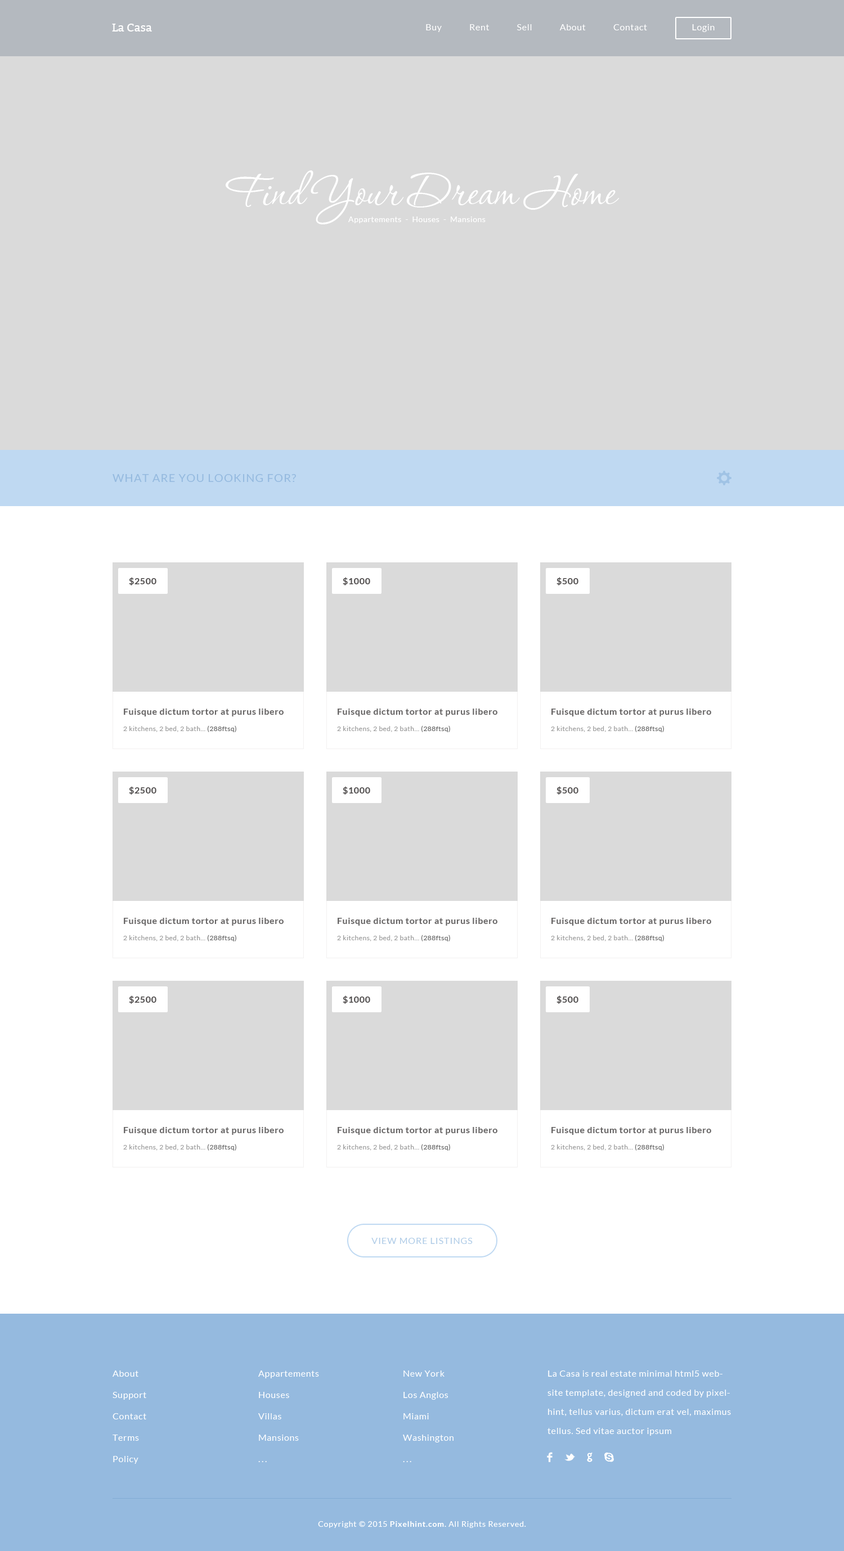
<style>
.page{position:relative;width:844px;height:1551px;background:#dadada}
.page>*{position:absolute;margin:0}
.t1{font:11.2px "Bitter-Regular";color:#ffffff}
.t2{font:9px "Lato-Regular";letter-spacing:0.04em;color:#ffffff}
.t3{font:56.2px "P22Corinthia";color:#ffffff}
.t4{font:7.9px "Lato-Regular";letter-spacing:0.04em;color:#ffffff}
.t5{font:11.2px "Lato-Regular";letter-spacing:0.06em;color:#95badf;text-transform:uppercase}
.t6{font:9px "Lato-Bold";letter-spacing:0.04em;color:#514e4e}
.t7{font:9px "Lato-Bold";letter-spacing:0.04em;color:#676565}
.t8{font:6.8px "Lato-Regular";letter-spacing:0.04em;color:#9d9d9d}
.t9{font:6.8px "Lato-Regular";letter-spacing:0.04em;color:#676767}
.t10{font:9px "Lato-Regular";letter-spacing:0.06em;color:#b0cce7;text-transform:uppercase}
.t11{font:9px/21.4px "Lato-Regular";letter-spacing:0.04em;color:#ffffff}
.t12{font:9px/21.4px "Lato-Regular";letter-spacing:0.16em;color:#ffffff}
.t13{font:9px/19.1px "Lato-Regular";letter-spacing:0.04em;color:#ffffff}
.t14{font:7.9px "Lato-Regular";letter-spacing:0.06em;color:#ffffff}
.t15{font:7.9px "Lato-Bold";letter-spacing:0.06em;color:#ffffff}
</style>
<div class="page">
<p class="t1" style="left:112px;top:24px;width:40px;height:8px">La Casa</p>
<p class="t2" style="left:426px;top:24px;width:221px;height:8px">Buy             Rent             Sell             About             Contact</p>
<p class="t2" style="left:692px;top:24px;width:22px;height:8px">Login</p>
<p class="t3" style="left:226px;top:170px;width:393px;height:54px">Find Your Dream Home</p>
<p class="t4" style="left:348px;top:217px;width:137px;height:6px">Appartements  -  Houses  -  Mansions</p>
<p class="t5" style="left:112px;top:474px;width:184px;height:8px">What are you looking for?</p>
<p class="t6" style="left:129px;top:577px;width:27px;height:9px">$2500</p>
<p class="t6" style="left:343px;top:577px;width:27px;height:9px">$1000</p>
<p class="t6" style="left:556px;top:577px;width:22px;height:9px">$500</p>
<p class="t7" style="left:124px;top:709px;width:160px;height:8px">Fuisque dictum tortor at purus libero</p>
<p class="t7" style="left:338px;top:709px;width:159px;height:8px">Fuisque dictum tortor at purus libero</p>
<p class="t7" style="left:551px;top:709px;width:160px;height:8px">Fuisque dictum tortor at purus libero</p>
<p class="t8" style="left:123px;top:726px;width:113px;height:6px">2 kitchens, 2 bed, 2 bath... <span class="t9">(288ftsq)</span></p>
<p class="t8" style="left:337px;top:726px;width:113px;height:6px">2 kitchens, 2 bed, 2 bath... <span class="t9">(288ftsq)</span></p>
<p class="t8" style="left:551px;top:726px;width:113px;height:6px">2 kitchens, 2 bed, 2 bath... <span class="t9">(288ftsq)</span></p>
<p class="t6" style="left:129px;top:786px;width:27px;height:9px">$2500</p>
<p class="t6" style="left:343px;top:786px;width:27px;height:9px">$1000</p>
<p class="t6" style="left:556px;top:786px;width:22px;height:9px">$500</p>
<p class="t7" style="left:124px;top:918px;width:160px;height:8px">Fuisque dictum tortor at purus libero</p>
<p class="t7" style="left:338px;top:918px;width:159px;height:8px">Fuisque dictum tortor at purus libero</p>
<p class="t7" style="left:551px;top:918px;width:160px;height:8px">Fuisque dictum tortor at purus libero</p>
<p class="t8" style="left:123px;top:935px;width:113px;height:7px">2 kitchens, 2 bed, 2 bath... <span class="t9">(288ftsq)</span></p>
<p class="t8" style="left:337px;top:935px;width:113px;height:7px">2 kitchens, 2 bed, 2 bath... <span class="t9">(288ftsq)</span></p>
<p class="t8" style="left:551px;top:935px;width:113px;height:7px">2 kitchens, 2 bed, 2 bath... <span class="t9">(288ftsq)</span></p>
<p class="t6" style="left:129px;top:996px;width:27px;height:8px">$2500</p>
<p class="t6" style="left:343px;top:996px;width:27px;height:8px">$1000</p>
<p class="t6" style="left:556px;top:996px;width:22px;height:8px">$500</p>
<p class="t7" style="left:124px;top:1127px;width:160px;height:8px">Fuisque dictum tortor at purus libero</p>
<p class="t7" style="left:338px;top:1127px;width:159px;height:8px">Fuisque dictum tortor at purus libero</p>
<p class="t7" style="left:551px;top:1127px;width:160px;height:8px">Fuisque dictum tortor at purus libero</p>
<p class="t8" style="left:123px;top:1144px;width:113px;height:7px">2 kitchens, 2 bed, 2 bath... <span class="t9">(288ftsq)</span></p>
<p class="t8" style="left:337px;top:1144px;width:113px;height:7px">2 kitchens, 2 bed, 2 bath... <span class="t9">(288ftsq)</span></p>
<p class="t8" style="left:551px;top:1144px;width:113px;height:7px">2 kitchens, 2 bed, 2 bath... <span class="t9">(288ftsq)</span></p>
<p class="t10" style="left:371px;top:1238px;width:101px;height:6px">View More Listings</p>
<p class="t11" style="left:112px;top:1371px;width:34px;height:93px">About<br>Support<br>Contact<br>Terms<br>Policy</p>
<p class="t11" style="left:258px;top:1371px;width:61px;height:91px">Appartements<br>Houses<br>Villas<br>Mansions<br><span class="t12">...</span></p>
<p class="t11" style="left:403px;top:1371px;width:50px;height:91px">New York<br>Los Anglos<br>Miami<br>Washington<br><span class="t12">...</span></p>
<p class="t13" style="left:547px;top:1371px;width:184px;height:65px">La Casa is real estate minimal html5 website template, designed and coded by pixelhint, tellus varius, dictum erat vel, maximus tellus. Sed vitae auctor ipsum</p>
<p class="t14" style="left:318px;top:1522px;width:208px;height:6px">Copyright © 2015 <span class="t15">Pixelhint.com</span>. All Rights Reserved.</p>
</div>
